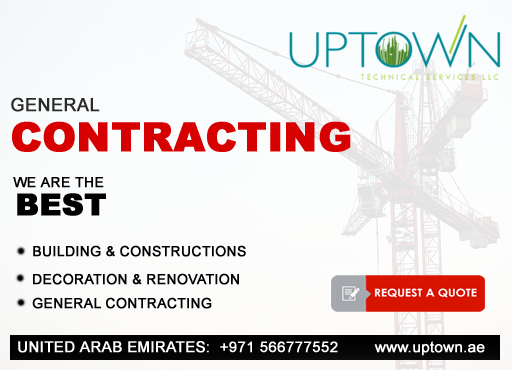
<style>
.page{position:relative;width:512px;height:370px}
.page>*{position:absolute;margin:0}
.t1{font:18px "ArialMT";color:#2a2a2a;font-weight:bold}
.t2{font:40px "Arial-Black";color:#d70000;font-weight:bold}
.t3{font:14px "ArialMT";color:#000000;font-weight:bold}
.t4{font:30px "Arial-Black";color:#000000;font-weight:bold}
.t5{font:15px "ArialMT";color:#ffffff;font-weight:bold}
</style>
<div class="page">
<p class="t1" style="left:11px;top:97px;width:89px;height:15px">GENERAL</p>
<p class="t2" style="left:12px;top:121px;width:339px;height:31px">CONTRACTING</p>
<p class="t3" style="left:13px;top:177px;width:91px;height:11px">WE ARE THE</p>
<p class="t4" style="left:17px;top:193px;width:89px;height:23px">BEST</p>
<p class="t3" style="left:33px;top:245px;width:213px;height:12px">BUILDING &amp; CONSTRUCTIONS</p>
<p class="t3" style="left:33px;top:273px;width:206px;height:12px">DECORATION &amp; RENOVATION</p>
<p class="t3" style="left:32px;top:297px;width:180px;height:12px">GENERAL CONTRACTING</p>
<p class="t5" style="left:18px;top:341px;width:467px;height:15px">UNITED ARAB EMIRATES:  +971 566777552        www.uptown.ae</p>
</div>
